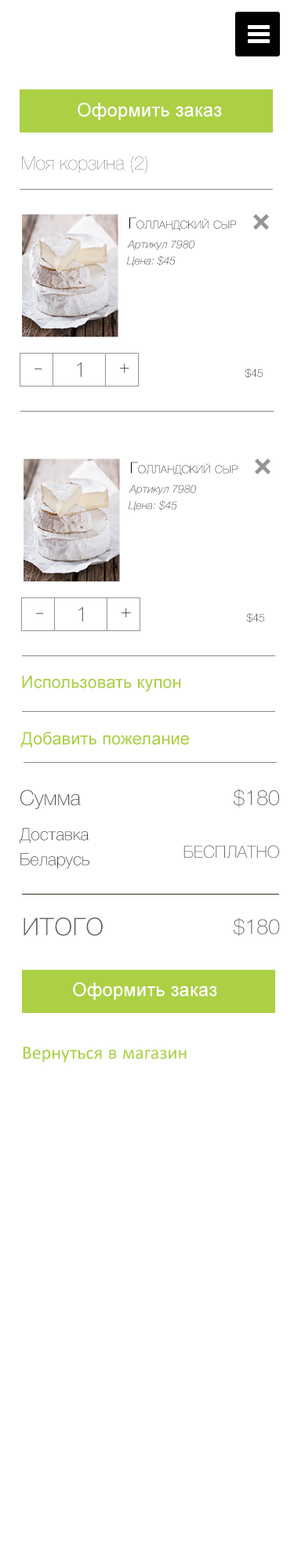
<style>
.page{position:relative;width:294px;height:1568px;background:#ffffff}
.page>*{position:absolute;margin:0}
.t1{font:18.8px "ArialMT";color:#ffffff}
.t2{font:18.8px "HelveticaNeueCyr-UltraLight"}
.t3{font:18.8px "HelveticaNeueCyr-UltraLight";text-transform:uppercase}
.t4{font:15.5px "HelveticaNeueCyr-Thin";color:#000000;font-variant:small-caps}
.t5{font:11px "HelveticaNeueCyr-ThinItalic"}
.t6{font:11px "HelveticaNeueCyr-ThinItalic";text-transform:uppercase}
.t7{font:21.2px "HelveticaNeueCyr-Thin";color:#6c6c6c}
.t8{font:18.8px "HelveticaNeueCyr-Thin";color:#383838}
.t9{font:32.5px "HelveticaNeueCyr-Thin";color:#868383}
.t10{font:11px "HelveticaNeueCyr-Thin"}
.t11{font:17.2px/56.4px "ArialMT";color:#abd044}
.t12{font:21px "HelveticaNeueCyr-Thin";color:#4f4f4f}
.t13{font:21px "HelveticaNeueCyr-Thin";color:#676767}
.t14{font:16.8px/25.1px "HelveticaNeueCyr-Thin";color:#414141}
.t15{font:16.8px "HelveticaNeueCyr-Thin";color:#676767}
.t16{font:33.5px "HelveticaNeueCyr-Thin";color:#636363}
.t17{font:21px "HelveticaNeueCyr-Thin";color:#636363}
.t18{font:18.8px "Calibri";color:#abd044}
</style>
<div class="page">
<p class="t1" style="left:78px;top:103px;width:144px;height:18px">Оформить заказ</p>
<p class="t2" style="left:22px;top:156px;width:125px;height:17px">Моя корзина (<span class="t3">2)</span></p>
<p class="t4" style="left:129px;top:217px;width:107px;height:13px">Голландский сыр</p>
<p class="t5" style="left:127px;top:240px;width:68px;height:10px">Артикул<span class="t6"> 7980</span></p>
<p class="t5" style="left:127px;top:256px;width:49px;height:11px">Цена: $45</p>
<p class="t7" style="left:77px;top:362px;width:5px;height:15px">1</p>
<p class="t8" style="left:119px;top:364px;width:10px;height:9px">+</p>
<p class="t9" style="left:34px;top:368px;width:8px;height:2px">-</p>
<p class="t10" style="left:245px;top:368px;width:18px;height:11px">$45</p>
<p class="t4" style="left:131px;top:462px;width:107px;height:13px">Голландский сыр</p>
<p class="t5" style="left:129px;top:485px;width:68px;height:10px">Артикул<span class="t6"> 7980</span></p>
<p class="t5" style="left:129px;top:500px;width:48px;height:11px">Цена: $45</p>
<p class="t9" style="left:36px;top:612px;width:8px;height:3px">-</p>
<p class="t7" style="left:78px;top:607px;width:5px;height:15px">1</p>
<p class="t8" style="left:121px;top:608px;width:10px;height:10px">+</p>
<p class="t10" style="left:246px;top:613px;width:18px;height:10px">$45</p>
<p class="t11" style="left:20px;top:675px;width:170px;height:73px">Использовать купон<br>Добавить пожелание</p>
<p class="t12" style="left:20px;top:789px;width:61px;height:20px">Сумма</p>
<p class="t13" style="left:234px;top:789px;width:45px;height:19px">$180</p>
<p class="t14" style="left:20px;top:828px;width:69px;height:41px">Доставка Беларусь</p>
<p class="t15" style="left:183px;top:845px;width:96px;height:13px">БЕСПЛАТНО</p>
<p class="t16" style="left:24px;top:917px;width:79px;height:19px">итого</p>
<p class="t17" style="left:234px;top:917px;width:46px;height:19px">$180</p>
<p class="t1" style="left:73px;top:982px;width:144px;height:18px">Оформить заказ</p>
<p class="t18" style="left:23px;top:1047px;width:164px;height:15px">Вернуться в магазин</p>
</div>
